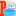
<style>
.page{position:relative;width:16px;height:16px;background:#ff3300}
.page>*{position:absolute;margin:0}
.t1{font:18.9px "BirchStd";color:#ff3300;font-weight:bold}
</style>
<div class="page">
<p class="t1" style="left:0px;top:1px;width:6px;height:15px">P</p>
</div>
